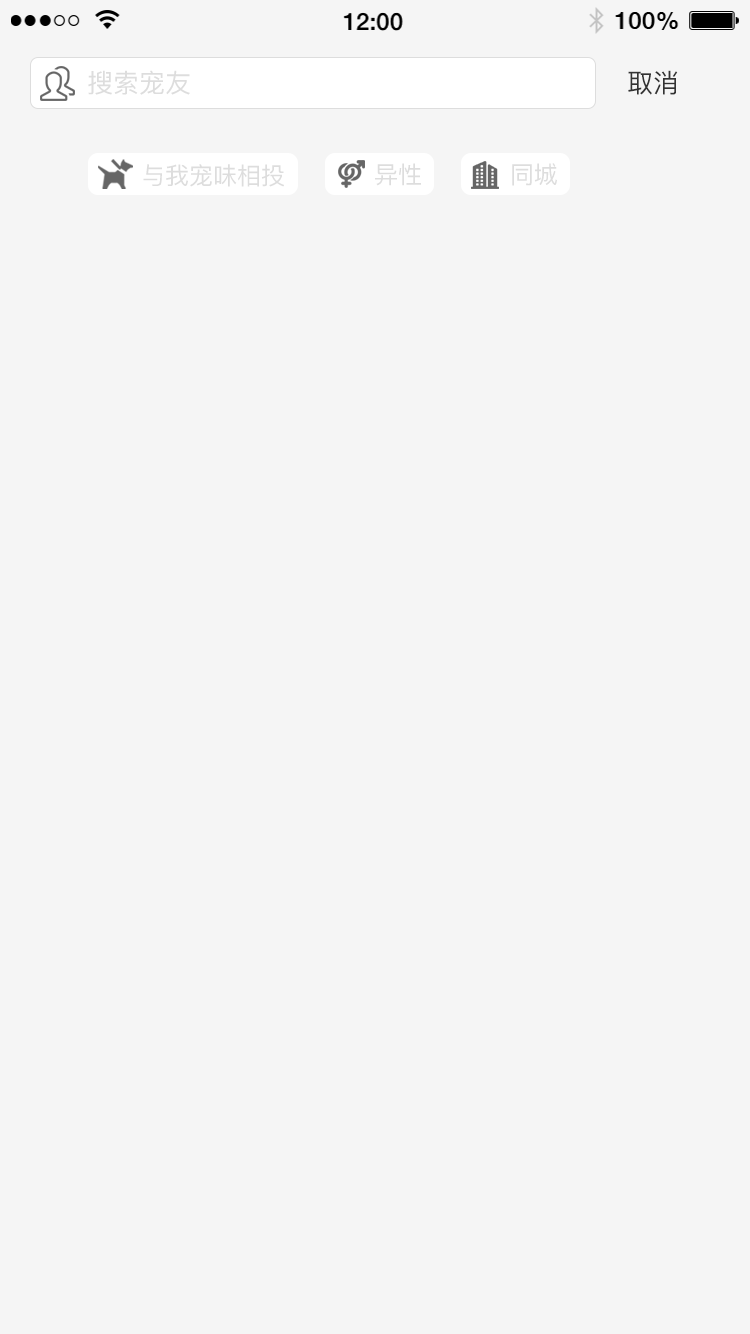
<style>
.page{position:relative;width:750px;height:1334px;background:#f5f5f5}
.page>*{position:absolute;margin:0}
.t1{font:26px "PingFangSC";color:#dddddd}
.t2{font:26px "PingFangSC";color:#333333}
.t3{font:24px "PingFangSC";color:#dddddd}
</style>
<div class="page">
<p class="t1" style="left:88px;top:70px;width:102px;height:25px">搜索宠友</p>
<p class="t2" style="left:628px;top:70px;width:50px;height:25px">取消</p>
<p class="t3" style="left:143px;top:164px;width:141px;height:23px">与我宠味相投</p>
<p class="t3" style="left:375px;top:163px;width:46px;height:23px">异性</p>
<p class="t3" style="left:512px;top:163px;width:45px;height:23px">同城</p>
</div>
